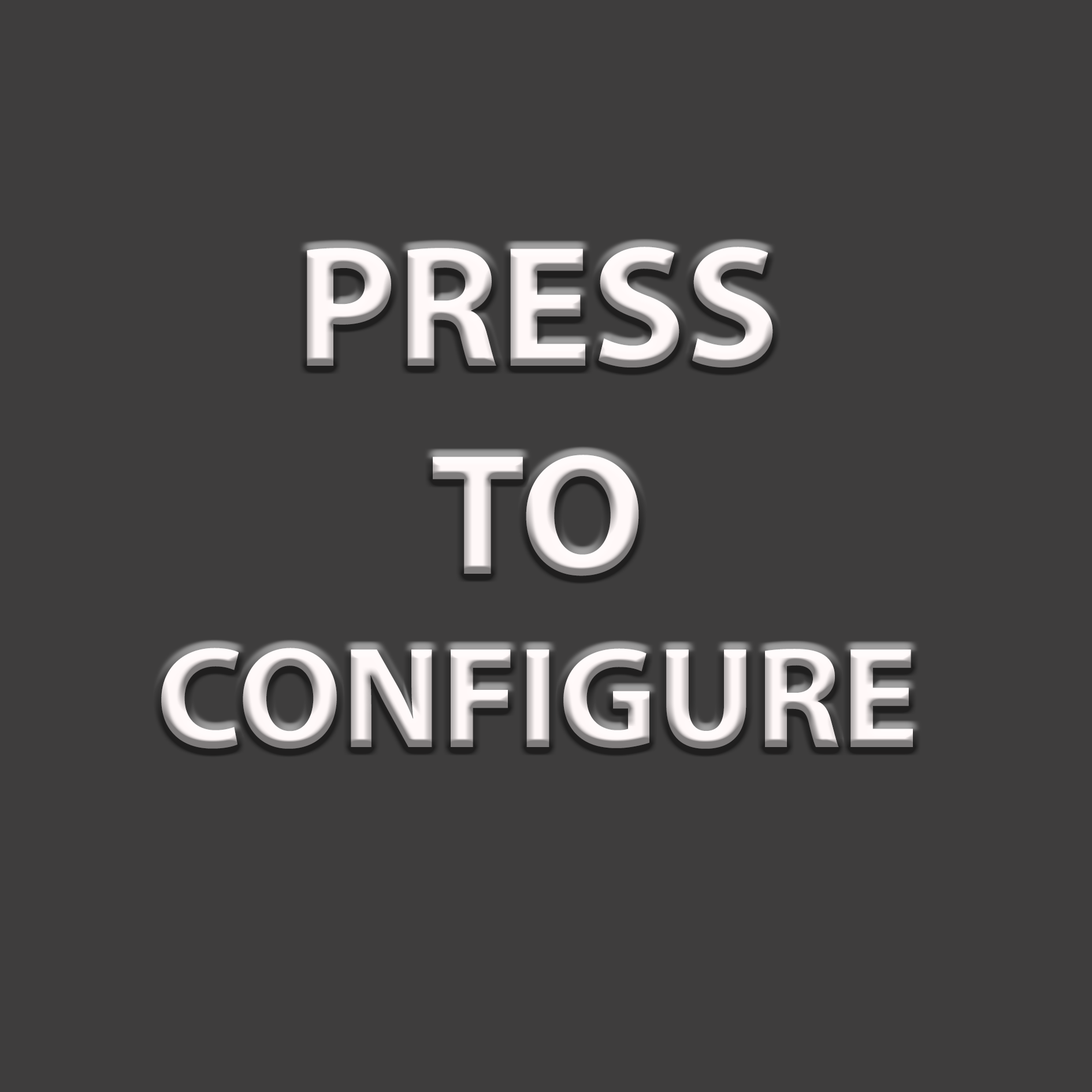
<style>
.page{position:relative;width:1092px;height:1092px;background:#3e3d3d}
.page>*{position:absolute;margin:0}
.t1{font:144.4px "MyriadPro-Bold"}
.t2{font:173.3px "MyriadPro-Bold"}
</style>
<div class="page">
<p class="t1" style="left:161px;top:247px;width:752px;height:502px;text-align:center"><span class="t2">PRESS<br>TO<br></span>CONFIGURE</p>
</div>
